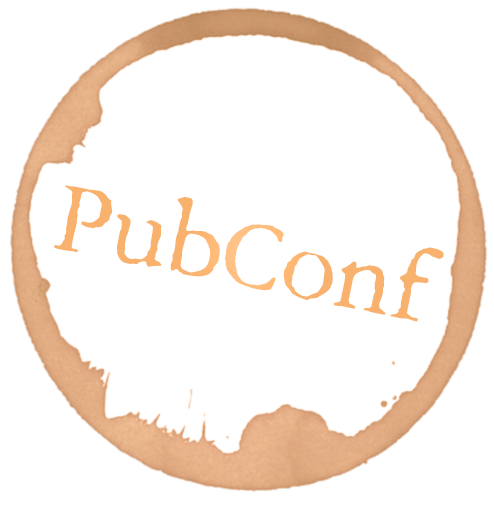
<style>
.page{position:relative;width:494px;height:505px;background:#ffffff}
.page>*{position:absolute;margin:0}
.t1{font:93px "Aquifer";color:#f8b26e}
</style>
<div class="page">
<p class="t1" style="left:54px;top:185px;width:390px;height:137px;rotate:11deg">PubConf</p>
</div>
